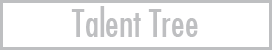
<style>
.page{position:relative;width:272px;height:50px;background:#ffffff}
.page>*{position:absolute;margin:0}
.t1{font:37.3px "FuturaCondensed";color:#bebfc1}
</style>
<div class="page">
<p class="t1" style="left:71px;top:6px;width:127px;height:31px">Talent Tree</p>
</div>
